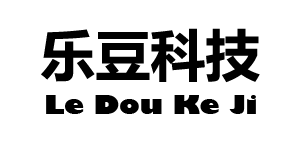
<style>
.page{position:relative;width:300px;height:150px;background:#ffffff}
.page>*{position:absolute;margin:0}
.t1{font:55px "MicrosoftYaHei-Bold";color:#000000}
.t2{font:25px "GillSans-UltraBold";color:#000000;scale:1.15 1}
</style>
<div class="page">
<p class="t1" style="left:41px;top:28px;width:219px;height:55px">乐豆科技</p>
<p class="t2" style="left:46px;top:95px;width:210px;height:19px">Le Dou Ke Ji</p>
</div>
